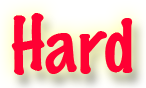
<style>
.page{position:relative;width:146px;height:88px;background:#ff0033}
.page>*{position:absolute;margin:0}
.t1{font:70.4px "MarkerFelt-Thin";color:#ff0033}
</style>
<div class="page">
<p class="t1" style="left:11px;top:13px;width:122px;height:62px">Hard</p>
<p class="t1" style="left:11px;top:13px;width:122px;height:62px">Hard</p>
</div>
